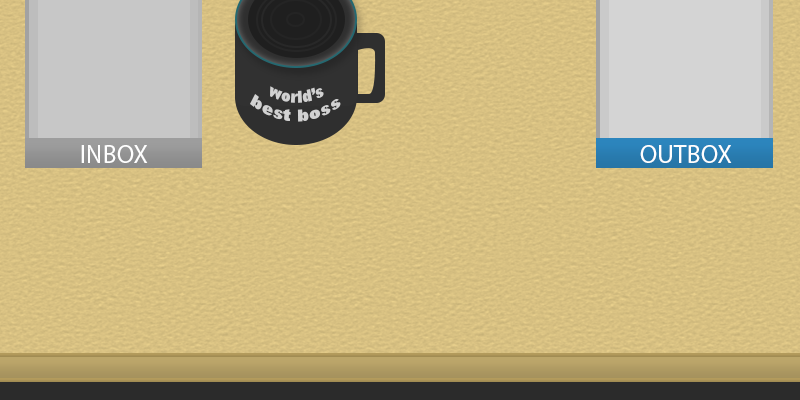
<style>
.page{position:relative;width:800px;height:400px}
.page>*{position:absolute;margin:0}
.t1{font:15.6px "Arial-Black";color:#d2d2d2;scale:0.79 1}
.t2{font:25.6px "MyriadPro-Regular";color:#ffffff}
</style>
<div class="page">
<p class="t1" style="left:250px;top:86px;width:91px;height:36px;text-align:center">world’s<br>best boss</p>
<p class="t2" style="left:81px;top:145px;width:67px;height:18px">INBOX</p>
<p class="t2" style="left:640px;top:145px;width:92px;height:18px">OUTBOX</p>
</div>
